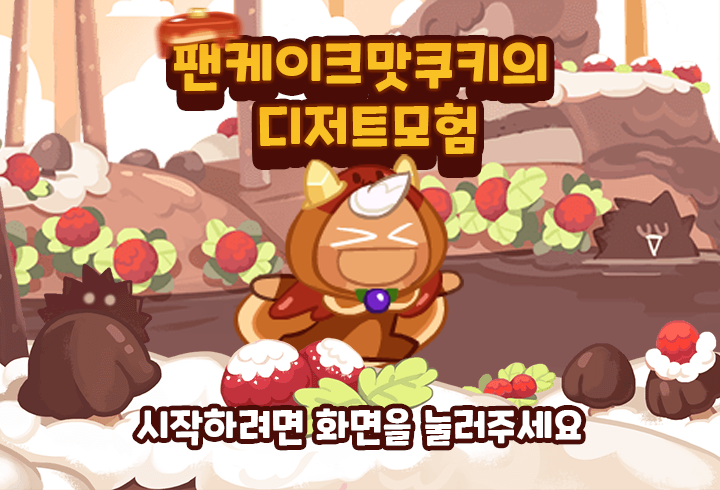
<style>
.page{position:relative;width:720px;height:490px}
.page>*{position:absolute;margin:0}
.t1{font:52.4px "CookieRun-Bold";color:#f9be23}
.t2{font:52.4px "CookieRun-Bold"}
.t3{font:52.4px "CookieRun-Bold";color:#f9c024}
.t4{font:37.6px "CookieRun-Bold";color:#ffffff}
</style>
<div class="page">
<p class="t1" style="left:173px;top:42px;width:374px;height:50px">팬케이크맛쿠키의</p>
<p class="t2" style="left:173px;top:48px;width:374px;height:50px">팬케이크맛쿠키의</p>
<p class="t1" style="left:173px;top:42px;width:374px;height:50px">팬케이크맛쿠키의</p>
<p class="t3" style="left:259px;top:103px;width:217px;height:51px">디저트모험</p>
<p class="t3" style="left:259px;top:103px;width:217px;height:51px">디저트모험</p>
<p class="t4" style="left:137px;top:408px;width:445px;height:38px">시작하려면 화면을 눌러주세요</p>
</div>
